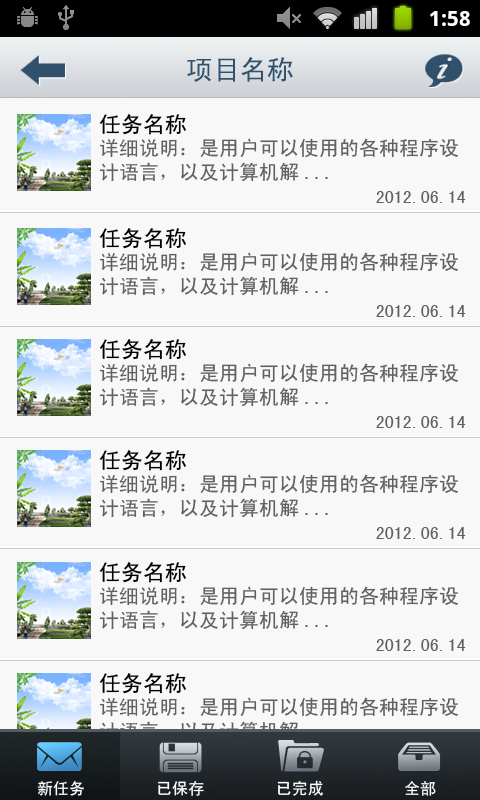
<style>
.page{position:relative;width:480px;height:800px;background:#f8f8f8}
.page>*{position:absolute;margin:0}
.t1{font:27px "SimHei";color:#30506c}
.t2{font:22px "SimHei";color:#010000}
.t3{font:20px/23.8px "SimHei";color:#606060}
.t4{font:18px "SimHei";color:#606060}
.t5{font:16px "SimHei";color:#ffffff}
</style>
<div class="page">
<p class="t1" style="left:187px;top:57px;width:106px;height:25px">项目名称</p>
<p class="t2" style="left:99px;top:114px;width:87px;height:21px">任务名称</p>
<p class="t3" style="left:99px;top:138px;width:359px;height:44px">详细说明：是用户可以使用的各种程序设<br>计语言，以及计算机解...</p>
<p class="t4" style="left:376px;top:191px;width:90px;height:12px">2012.06.14</p>
<p class="t2" style="left:99px;top:228px;width:87px;height:21px">任务名称</p>
<p class="t3" style="left:99px;top:252px;width:359px;height:44px">详细说明：是用户可以使用的各种程序设<br>计语言，以及计算机解...</p>
<p class="t4" style="left:376px;top:305px;width:90px;height:12px">2012.06.14</p>
<p class="t2" style="left:99px;top:339px;width:87px;height:21px">任务名称</p>
<p class="t3" style="left:99px;top:363px;width:359px;height:44px">详细说明：是用户可以使用的各种程序设<br>计语言，以及计算机解...</p>
<p class="t4" style="left:376px;top:416px;width:90px;height:12px">2012.06.14</p>
<p class="t2" style="left:99px;top:450px;width:87px;height:21px">任务名称</p>
<p class="t3" style="left:99px;top:474px;width:359px;height:44px">详细说明：是用户可以使用的各种程序设<br>计语言，以及计算机解...</p>
<p class="t4" style="left:376px;top:527px;width:90px;height:12px">2012.06.14</p>
<p class="t2" style="left:99px;top:562px;width:87px;height:21px">任务名称</p>
<p class="t3" style="left:99px;top:586px;width:359px;height:44px">详细说明：是用户可以使用的各种程序设<br>计语言，以及计算机解...</p>
<p class="t4" style="left:376px;top:639px;width:90px;height:12px">2012.06.14</p>
<p class="t2" style="left:99px;top:673px;width:87px;height:21px">任务名称</p>
<p class="t3" style="left:99px;top:697px;width:359px;height:44px">详细说明：是用户可以使用的各种程序设<br>计语言，以及计算机解...</p>
<p class="t5" style="left:37px;top:781px;width:47px;height:15px">新任务</p>
<p class="t5" style="left:158px;top:781px;width:46px;height:15px">已保存</p>
<p class="t5" style="left:277px;top:780px;width:46px;height:16px">已完成</p>
<p class="t5" style="left:405px;top:781px;width:31px;height:15px">全部</p>
</div>
